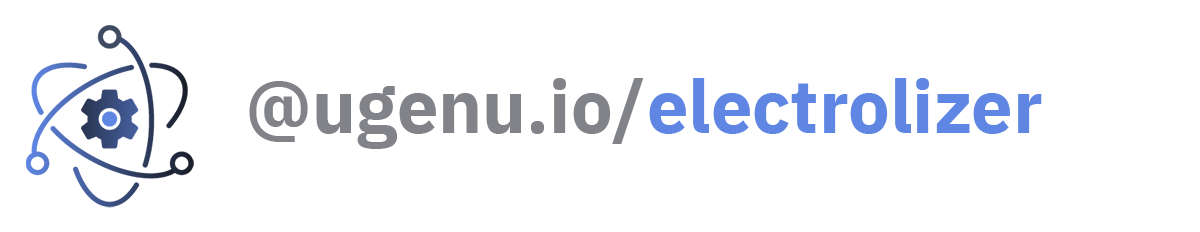
<style>
.page{position:relative;width:1200px;height:232px;background:#ffffff}
.page>*{position:absolute;margin:0}
.t1{font:74px "IBMPlexSans-Bold";color:#818388}
.t2{font:74px "IBMPlexSans-Bold";color:#5f86e3}
.t3{font:74px "IBMPlexSans";color:#191d27}
</style>
<div class="page">
<p class="t1" style="left:249px;top:78px;width:395px;height:71px">@ugenu.io/</p>
<p class="t2" style="left:649px;top:78px;width:393px;height:56px"><span class="t3">                      </span>electrolizer</p>
</div>
